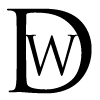
<style>
.page{position:relative;width:100px;height:100px;background:#ffffff}
.page>*{position:absolute;margin:0}
.t1{font:110.7px "TrajanPro-Regular";color:#000000}
.t2{font:63.1px "TrajanPro-Regular";color:#000000;scale:0.87 1}
</style>
<div class="page">
<p class="t1" style="left:7px;top:8px;width:85px;height:86px">D</p>
<p class="t2" style="left:23px;top:34px;width:55px;height:42px">w</p>
</div>
